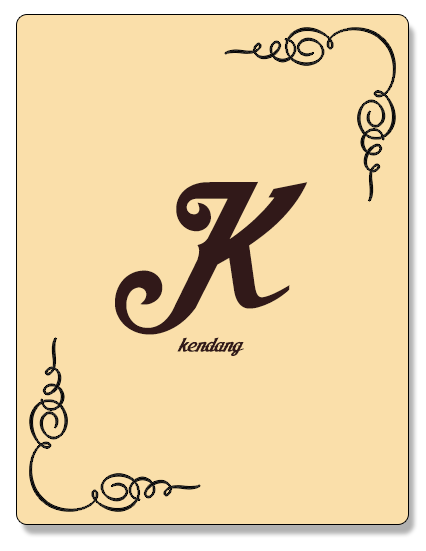
<style>
.page{position:relative;width:426px;height:551px;background:#fadfaa}
.page>*{position:absolute;margin:0}
.t1{font:130.4px "AishaScript";color:#311919}
.t2{font:18px "AishaScript";color:#311919}
</style>
<div class="page">
<p class="t1" style="left:115px;top:181px;width:193px;height:154px">K</p>
<p class="t2" style="left:177px;top:337px;width:67px;height:19px">kendang</p>
</div>
